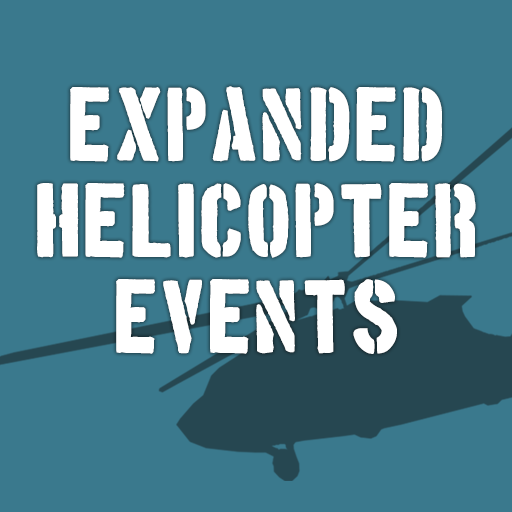
<style>
.page{position:relative;width:512px;height:512px;background:#3a798d}
.page>*{position:absolute;margin:0}
.t1{font:80px "BostonTraffic";color:#ffffff;font-weight:bold}
</style>
<div class="page">
<p class="t1" style="left:37px;top:86px;width:439px;height:268px;text-align:center">EXPANDED<br>HELICOPTER<br>EVENTS</p>
</div>
